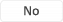
<style>
.page{position:relative;width:63px;height:22px;background:#ffffff}
.page>*{position:absolute;margin:0}
.t1{font:12px "Verdana";color:#454545}
</style>
<div class="page">
<p class="t1" style="left:24px;top:6px;width:15px;height:10px">No</p>
</div>
